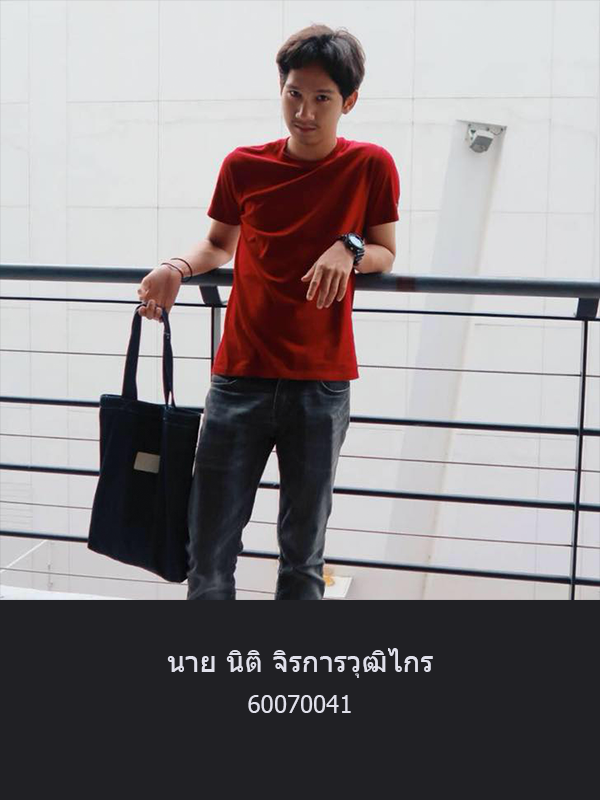
<style>
.page{position:relative;width:600px;height:800px;background:#202024}
.page>*{position:absolute;margin:0}
.t1{font:30px "Tahoma";color:#e0e0eb}
.t2{font:24px "Tahoma";color:#e0e0eb}
</style>
<div class="page">
<p class="t1" style="left:167px;top:648px;width:266px;height:30px">นาย นิติ จิรการวุฒิไกร</p>
<p class="t2" style="left:248px;top:695px;width:103px;height:18px">60070041</p>
</div>
